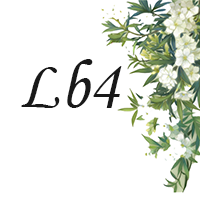
<style>
.page{position:relative;width:200px;height:200px;background:#ffffff}
.page>*{position:absolute;margin:0}
.t1{font:70px "MonotypeCorsiva";color:#191919}
</style>
<div class="page">
<p class="t1" style="left:21px;top:59px;width:101px;height:49px">Lb4</p>
</div>
